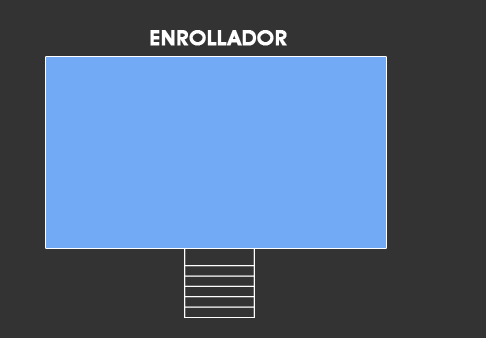
<style>
.page{position:relative;width:486px;height:338px;background:#333333}
.page>*{position:absolute;margin:0}
.t1{font:21.7px "AvantGardeITCbyBT-Demi";color:#ffffff;font-weight:bold}
</style>
<div class="page">
<p class="t1" style="left:150px;top:30px;width:137px;height:16px">ENROLLADOR</p>
</div>
